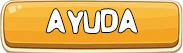
<style>
.page{position:relative;width:183px;height:53px}
.page>*{position:absolute;margin:0}
.t1{font:30.2px "Game_Time";color:#ffffff}
</style>
<div class="page">
<p class="t1" style="left:46px;top:9px;width:91px;height:24px">AYUDA</p>
</div>
